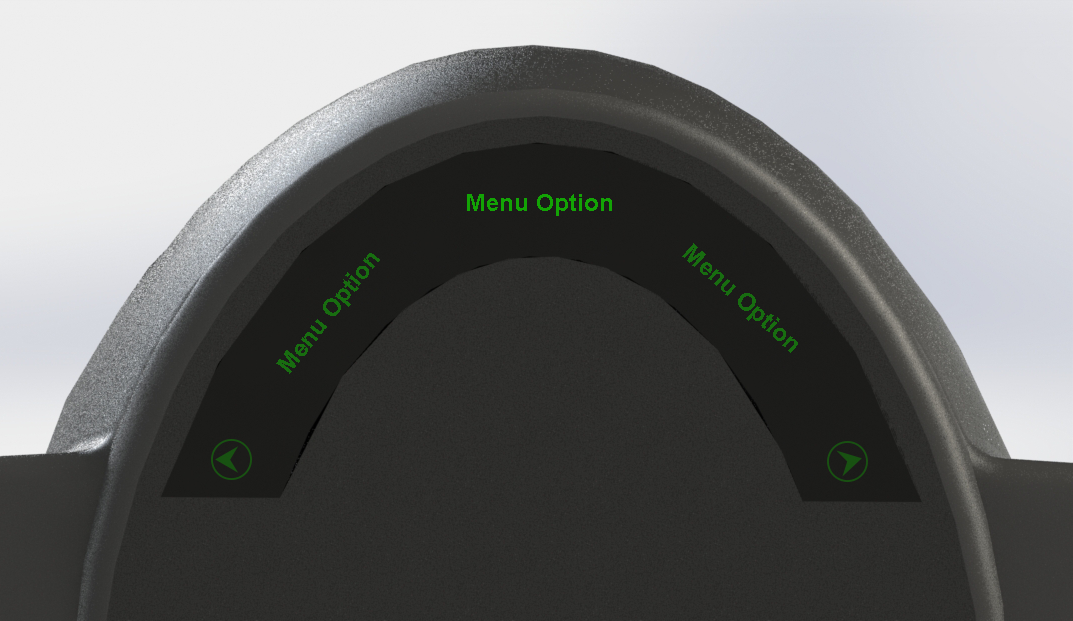
<style>
.page{position:relative;width:1073px;height:621px}
.page>*{position:absolute;margin:0}
.t1{font:24px "Arial-BoldMT";color:#13a305}
.t2{font:24px "Arial-BoldMT";color:#176d10}
.t3{font:24px "Arial-BoldMT";color:#186d10}
</style>
<div class="page">
<p class="t1" style="left:467px;top:194px;width:145px;height:22px">Menu Option</p>
<p class="t2" style="left:682px;top:243px;width:116px;height:110px;rotate:42deg">Menu Option</p>
<p class="t3" style="left:276px;top:253px;width:104px;height:121px;rotate:-52deg">Menu Option</p>
</div>
